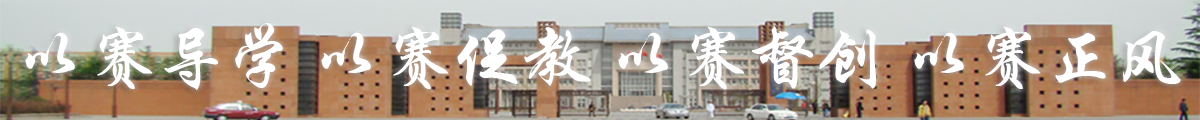
<style>
.page{position:relative;width:1200px;height:120px}
.page>*{position:absolute;margin:0}
.t1{font:69.8px "STXingkai";color:#ffffff}
</style>
<div class="page">
<p class="t1" style="left:25px;top:23px;width:1156px;height:67px">以赛导学 以赛促教 以赛督创 以赛正风</p>
</div>
